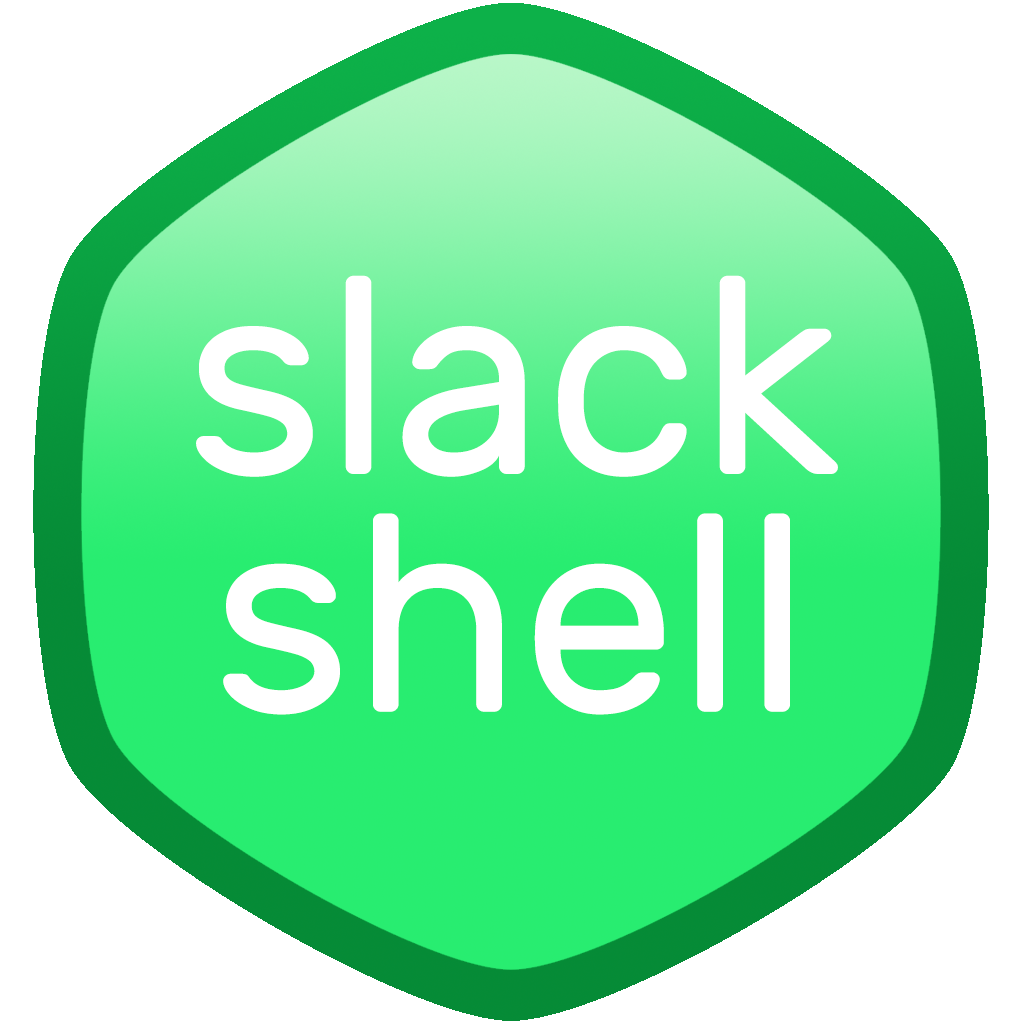
<style>
.page{position:relative;width:1024px;height:1024px;background:#ffffff}
.page>*{position:absolute;margin:0}
.t1{font:278.7px/215.2px "Rubik-Regular";color:#ffffff}
</style>
<div class="page">
<p class="t1" style="left:196px;top:275px;width:642px;height:440px;text-align:center">slack<br>shell</p>
</div>
